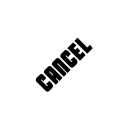
<style>
.page{position:relative;width:128px;height:128px;background:#ffffff}
.page>*{position:absolute;margin:0}
.t1{font:27.5px "CapitalDarenRegular";color:#000000;text-transform:uppercase;font-weight:bold}
</style>
<div class="page">
<p class="t1" style="left:35px;top:37px;width:58px;height:55px;rotate:-45deg">CANCel</p>
</div>
